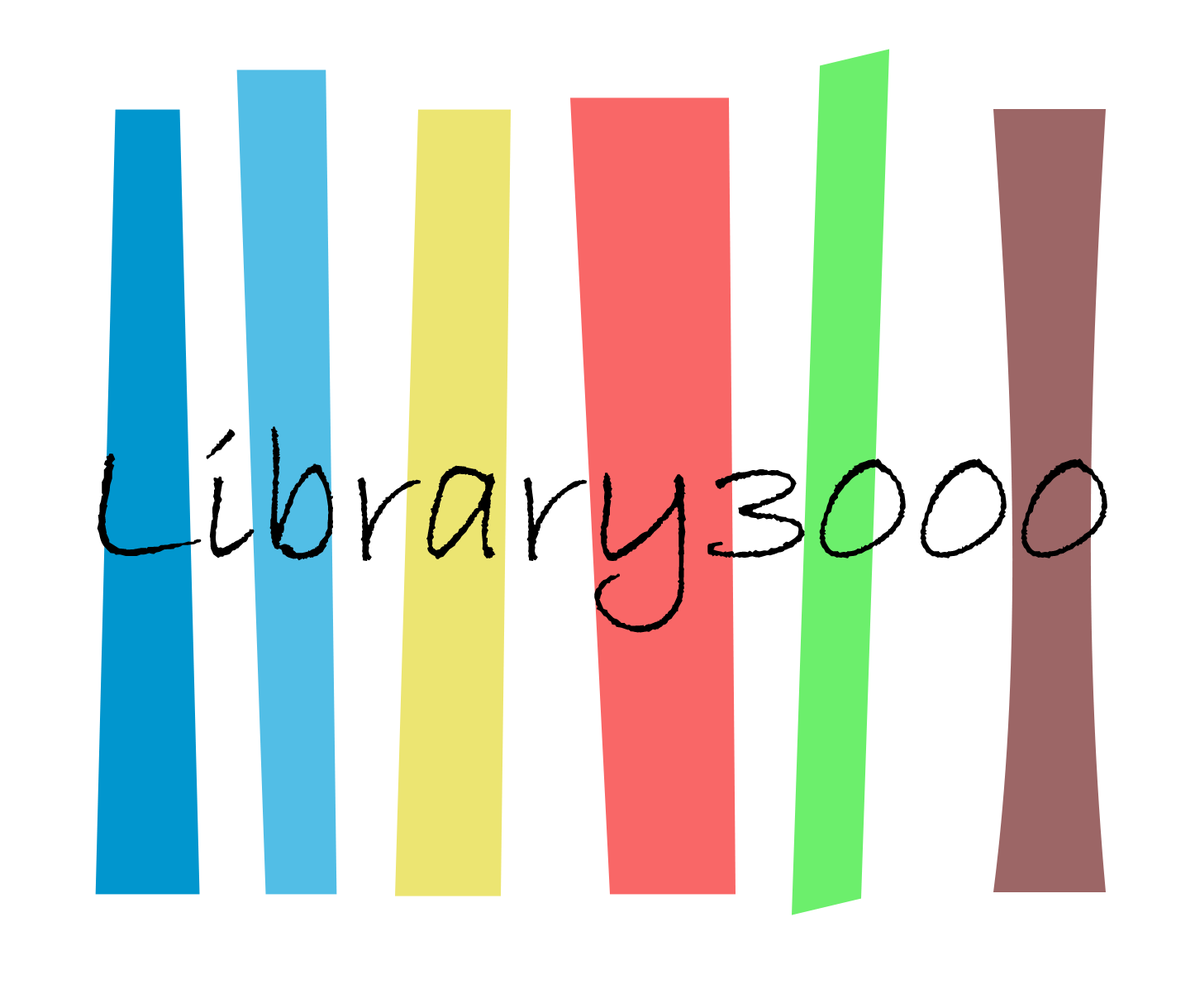
<style>
.page{position:relative;width:1195px;height:998px;background:#ffffff}
.page>*{position:absolute;margin:0}
.t1{font:191.7px "BradleyHandITC";color:#000000}
</style>
<div class="page">
<p class="t1" style="left:97px;top:426px;width:1010px;height:207px">Library3000</p>
</div>
